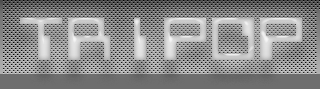
<style>
.page{position:relative;width:320px;height:89px}
.page>*{position:absolute;margin:0}
.t1{font:48px "G7-Silkworm-TTF";color:#cbcbcb}
</style>
<div class="page">
<p class="t1" style="left:20px;top:18px;width:282px;height:42px">TRIPOPzz</p>
</div>
